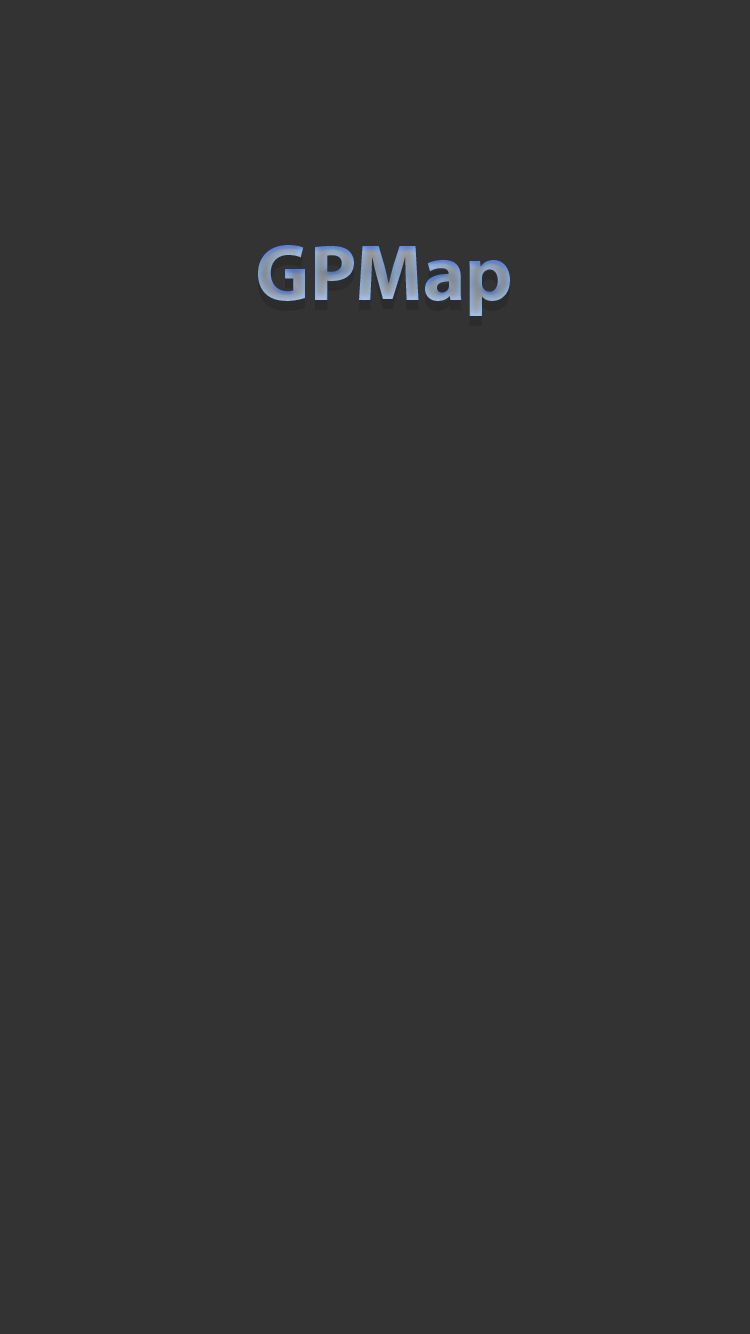
<style>
.page{position:relative;width:750px;height:1334px;background:#333333}
.page>*{position:absolute;margin:0}
.t1{font:80px "MyriadPro-Bold"}
</style>
<div class="page">
<p class="t1" style="left:258px;top:245px;width:252px;height:71px">GPMap</p>
</div>
